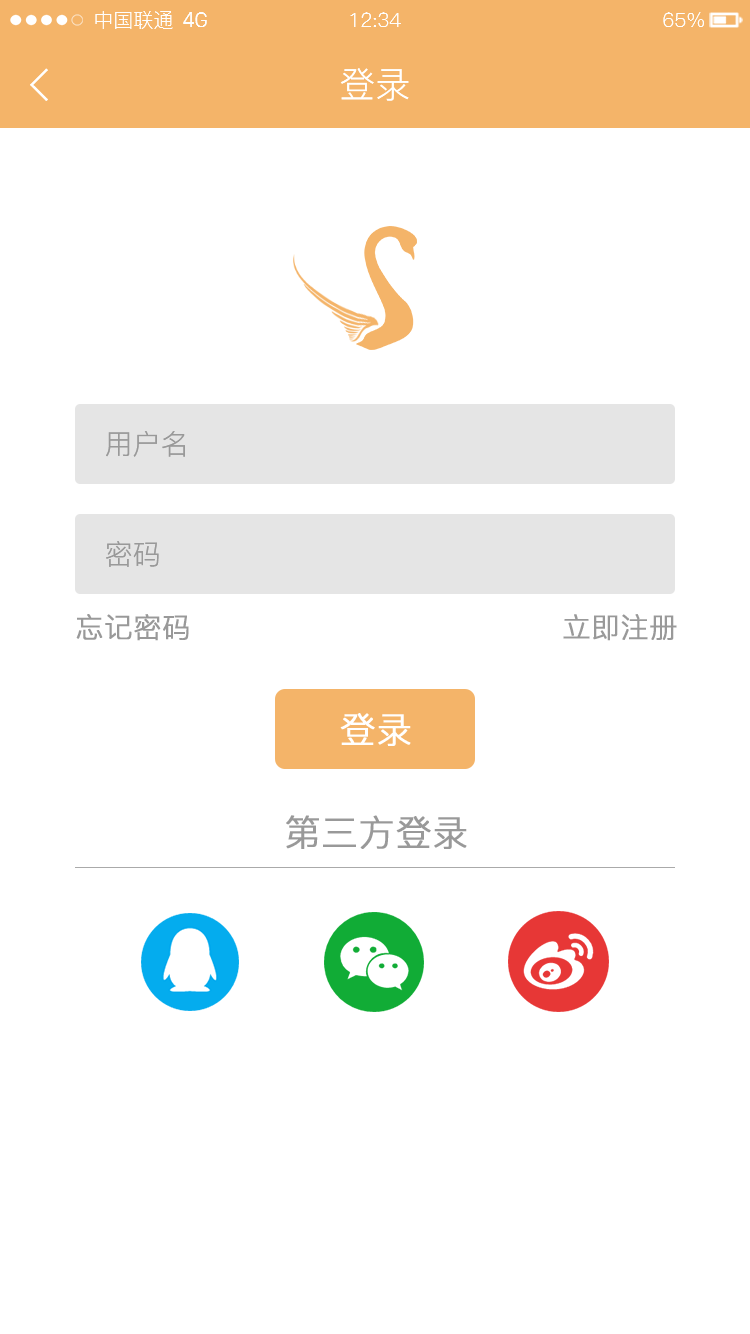
<style>
.page{position:relative;width:750px;height:1334px;background:#ffffff}
.page>*{position:absolute;margin:0}
.t1{font:20px "PingFang-SC-Regular";color:#fefefe}
.t2{font:20px "SanFranciscoDisplay";color:#fefefe}
.t3{font:36px "PingFang-SC-Regular";color:#ffffff}
.t4{font:28px "PingFang-SC-Regular";color:#999999}
.t5{font:28px "PingFang-SC-Regular";color:#999999;font-weight:bold}
.t6{font:36px "PingFang-SC-Regular";color:#ffffff;font-weight:bold}
.t7{font:36px "PingFang-SC-Regular";color:#999999;font-weight:bold}
</style>
<div class="page">
<p class="t1" style="left:95px;top:11px;width:78px;height:18px">中国联通</p>
<p class="t2" style="left:183px;top:12px;width:24px;height:15px">4G</p>
<p class="t1" style="left:350px;top:12px;width:51px;height:15px">12:34</p>
<p class="t1" style="left:663px;top:12px;width:41px;height:15px">65%</p>
<p class="t3" style="left:340px;top:68px;width:69px;height:33px">登录</p>
<p class="t4" style="left:106px;top:431px;width:79px;height:26px">用户名</p>
<p class="t4" style="left:106px;top:541px;width:53px;height:26px">密码</p>
<p class="t5" style="left:76px;top:614px;width:113px;height:27px">忘记密码</p>
<p class="t5" style="left:563px;top:614px;width:114px;height:27px">立即注册</p>
<p class="t6" style="left:340px;top:713px;width:71px;height:33px">登录</p>
<p class="t7" style="left:286px;top:815px;width:181px;height:34px">第三方登录</p>
</div>
